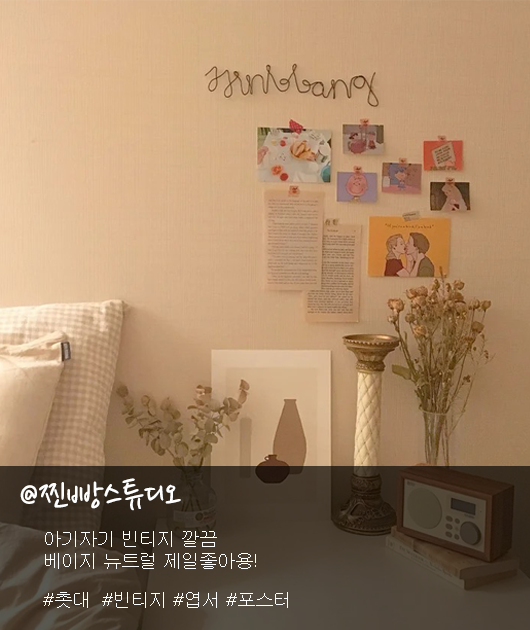
<style>
.page{position:relative;width:530px;height:630px}
.page>*{position:absolute;margin:0}
.t1{font:39.7px "NanumPen";color:#ffffff}
.t2{font:18px "Gulim";color:#ffffff}
</style>
<div class="page">
<p class="t1" style="left:20px;top:478px;width:161px;height:33px">@찐빵스튜디오</p>
<p class="t2" style="left:45px;top:531px;width:211px;height:38px">아기자기 빈티지 깔끔<br>베이지 뉴트럴 제일좋아용!</p>
<p class="t2" style="left:43px;top:592px;width:245px;height:16px">#촛대  #빈티지 #엽서 #포스터</p>
</div>
